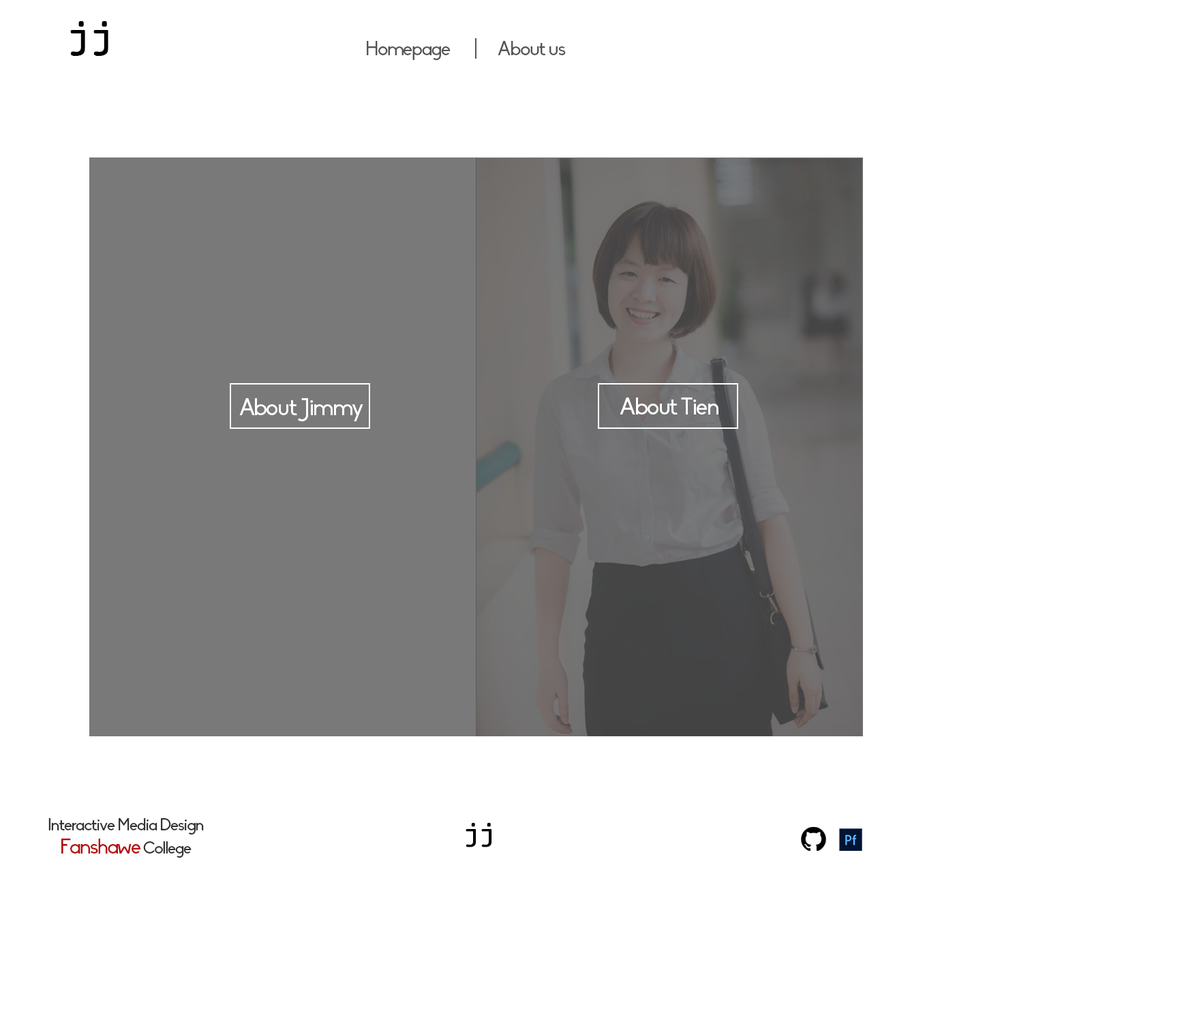
<style>
.page{position:relative;width:1182px;height:1009px;background:#ffffff}
.page>*{position:absolute;margin:0}
.t1{font:39.5px "Courier";letter-spacing:-0.05em;color:#000000;font-weight:bold}
.t2{font:19.2px "Biko";letter-spacing:-0.05em;color:#555555}
.t3{font:23.2px "Biko";letter-spacing:-0.05em;color:#ffffff}
.t4{font:16.4px "Biko";letter-spacing:-0.05em;color:#343333}
.t5{font:27.4px "Courier";letter-spacing:-0.05em;color:#000000;font-weight:bold}
.t6{font:20.4px "Biko";letter-spacing:-0.05em;color:#b50d0d}
</style>
<div class="page">
<p class="t1" style="left:70px;top:21px;width:38px;height:35px">jj</p>
<p class="t2" style="left:367px;top:38px;width:199px;height:23px">Homepage       |      About us</p>
<p class="t3" style="left:239px;top:398px;width:124px;height:23px">About Jimmy</p>
<p class="t3" style="left:620px;top:397px;width:98px;height:17px">About Tien</p>
<p class="t4" style="left:48px;top:818px;width:156px;height:17px">Interactive Media Design</p>
<p class="t5" style="left:466px;top:823px;width:26px;height:24px">jj</p>
<p class="t6" style="left:61px;top:838px;width:131px;height:20px">Fanshawe<span class="t4"> College</span></p>
</div>
